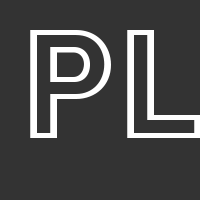
<style>
.page{position:relative;width:200px;height:200px;background:#333333}
.page>*{position:absolute;margin:0}
.t1{font:179.7px "AcierBATText-Outline";color:#ffffff}
</style>
<div class="page">
<p class="t1" style="left:30px;top:30px;width:171px;height:108px">PL</p>
</div>
